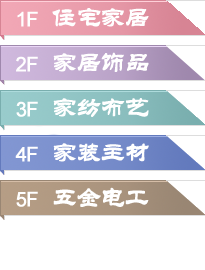
<style>
.page{position:relative;width:205px;height:270px;background:#ffffff}
.page>*{position:absolute;margin:0}
.t1{font:20px "ArialMT";letter-spacing:-0.06em;color:#ffffff;font-weight:bold}
.t2{font:25px "STLiti";letter-spacing:-0.06em;color:#ffffff;font-weight:bold}
</style>
<div class="page">
<p class="t1" style="left:17px;top:11px;width:21px;height:16px">1F</p>
<p class="t2" style="left:52px;top:8px;width:97px;height:19px">住宅家居</p>
<p class="t2" style="left:53px;top:52px;width:96px;height:20px">家居饰品</p>
<p class="t1" style="left:16px;top:56px;width:22px;height:16px">2F</p>
<p class="t1" style="left:16px;top:101px;width:22px;height:16px">3F</p>
<p class="t2" style="left:53px;top:98px;width:96px;height:19px">家纺布艺</p>
<p class="t1" style="left:15px;top:146px;width:23px;height:16px">4F</p>
<p class="t2" style="left:53px;top:143px;width:96px;height:19px">家装主材</p>
<p class="t1" style="left:16px;top:191px;width:22px;height:16px">5F</p>
<p class="t2" style="left:53px;top:187px;width:96px;height:20px">五金电工</p>
</div>
